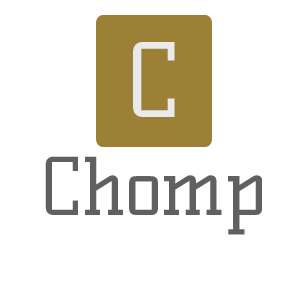
<style>
.page{position:relative;width:300px;height:300px;background:#ffffff}
.page>*{position:absolute;margin:0}
.t1{font:100px "KellySlab-Regular";color:#eaeaea}
.t2{font:77.8px "KellySlab-Regular";color:#5f6062}
</style>
<div class="page">
<p class="t1" style="left:133px;top:42px;width:42px;height:75px">C</p>
<p class="t2" style="left:45px;top:156px;width:217px;height:79px">Chomp</p>
</div>
